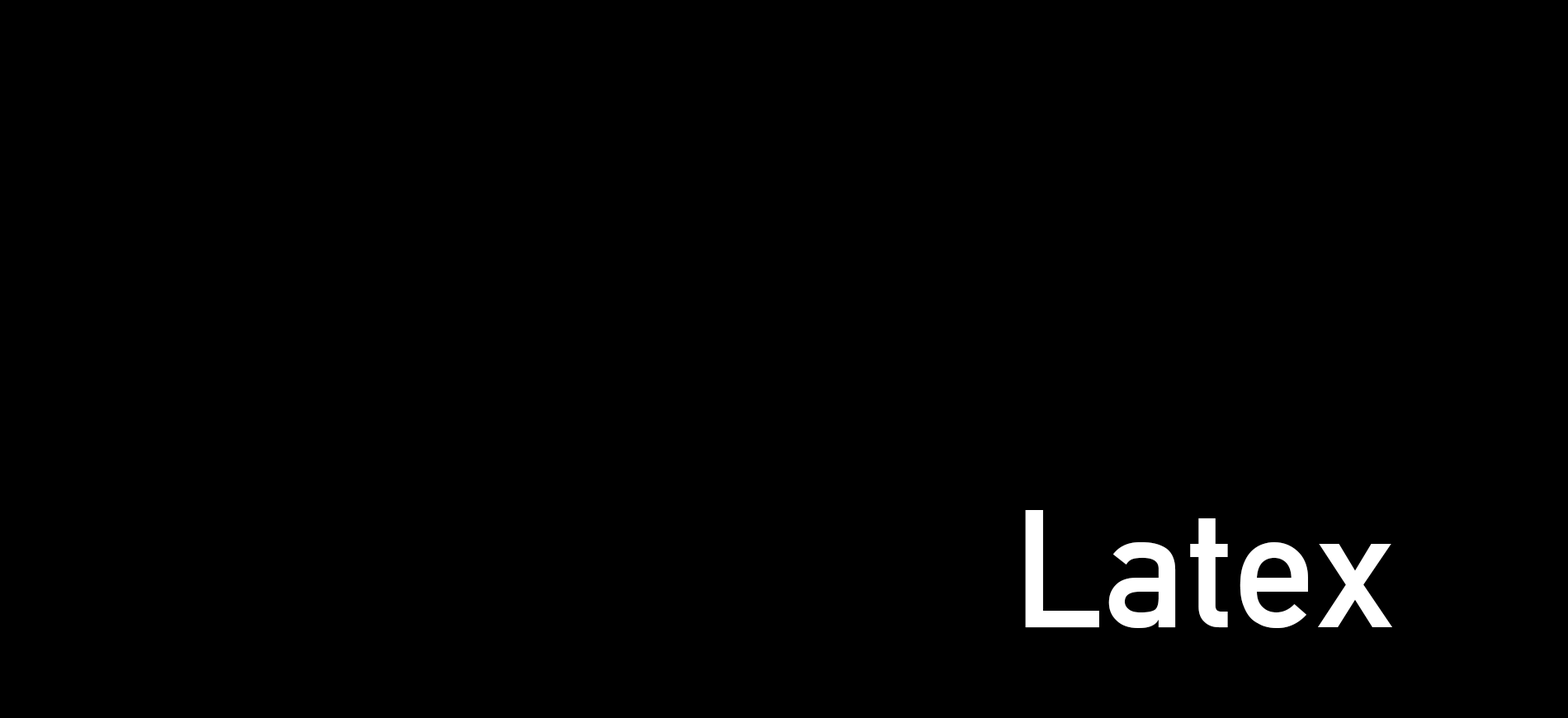
<style>
.page{position:relative;width:1568px;height:718px;background:#000000}
.page>*{position:absolute;margin:0}
.t1{font:165.1px "DINAlternate-Bold";color:#ffffff}
</style>
<div class="page">
<p class="t1" style="left:1025px;top:510px;width:367px;height:118px">Latex</p>
</div>
